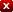
<style>
.page{position:relative;width:13px;height:12px;background:#540000}
.page>*{position:absolute;margin:0}
.t1{font:11px "YDIYGO330";letter-spacing:-0.075em;color:#ffffff;scale:1.11 1}
</style>
<div class="page">
<p class="t1" style="left:3px;top:3px;width:7px;height:6px">x</p>
</div>
